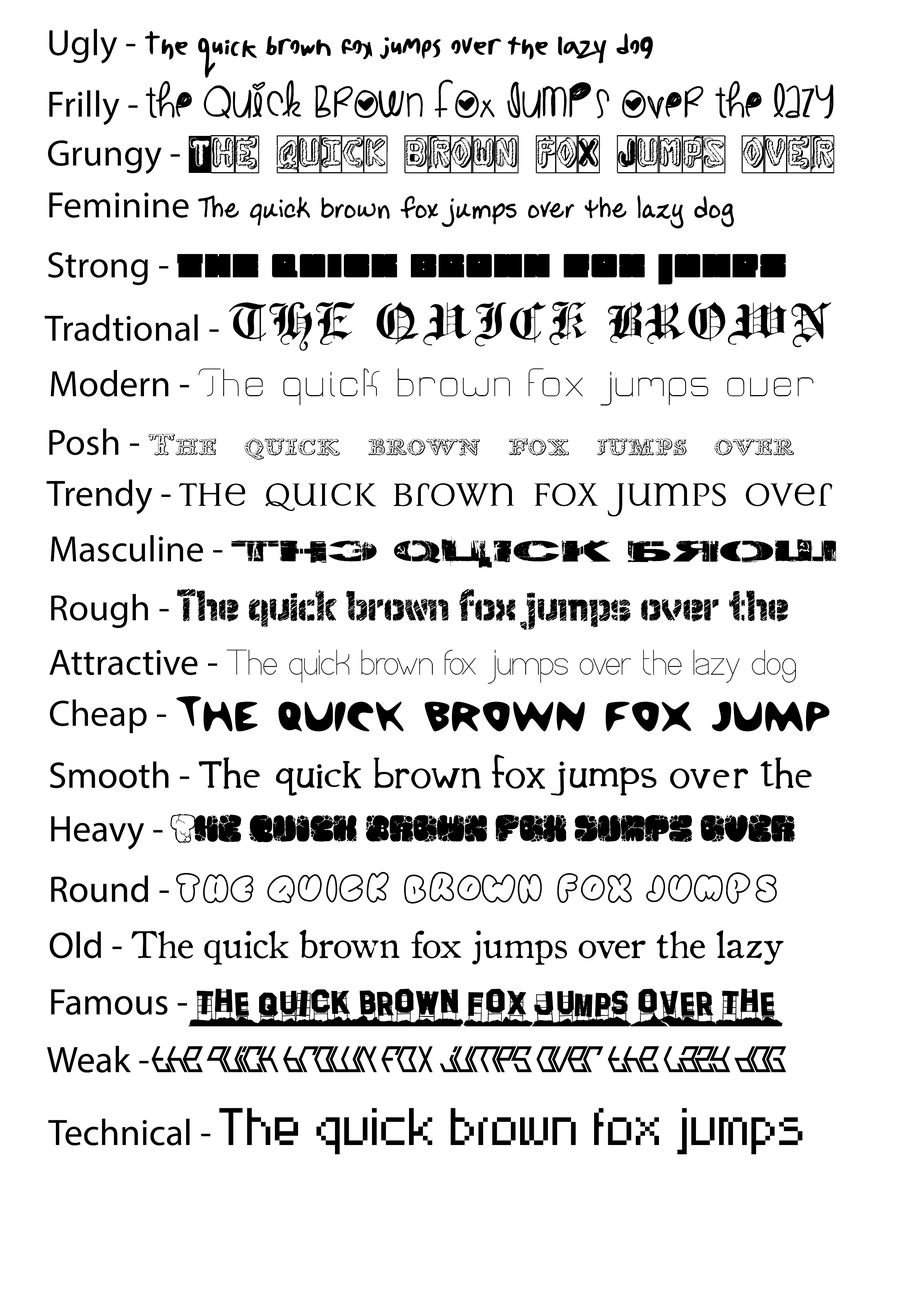
<style>
.page{position:relative;width:918px;height:1299px;background:#ffffff}
.page>*{position:absolute;margin:0}
.t1{font:37px "BadHandwriting7.2";color:#000000}
.t2{font:37px "MyriadPro-Regular";color:#000000}
.t3{font:37px "CuteLove";color:#000000}
.t4{font:37px "DymoGrungeBubble";color:#000000}
.t5{font:37px "LadylikeBB";color:#000000}
.t6{font:37px "BiggerBetterFasterStrongerPeter";color:#000000}
.t7{font:37px "Traditional-Gothic,-17th-c.-Regular";color:#000000}
.t8{font:37px "Untitled";color:#000000}
.t9{font:37px "ImprentaRoyalNonpareilBeveled";color:#000000}
.t10{font:37px "MultimaStrong";color:#000000}
.t11{font:37px "GulagDecay";color:#000000}
.t12{font:37px "WCWunderbachRoughBta";color:#000000}
.t13{font:37px "OPTICALFIBER";color:#000000}
.t14{font:37px "CheapMotel";color:#000000}
.t15{font:37px "39Smooth";color:#000000}
.t16{font:37px "MAWNSrock";color:#000000}
.t17{font:37px "SimpleRounded";color:#000000}
.t18{font:37px "OldStyle1HPLHS";color:#000000}
.t19{font:37px "HollywoodCapitalHills";color:#000000}
.t20{font:37px "BrokennWeakFont";color:#000000}
.t21{font:37px "RittswoodTechnical-Regular";color:#000000}
</style>
<div class="page">
<p class="t1" style="left:49px;top:29px;width:604px;height:49px"><span class="t2">Ugly - </span>The quick brown fox jumps over the lazy dog</p>
<p class="t3" style="left:49px;top:80px;width:785px;height:45px"><span class="t2">Frilly - </span>The quick brown fox jumps over the lazy dog</p>
<p class="t4" style="left:48px;top:135px;width:786px;height:39px"><span class="t2">Grungy - </span>The quick brown fox jumps over the lazy dog</p>
<p class="t5" style="left:49px;top:193px;width:685px;height:35px"><span class="t2">Feminine </span>The quick brown fox jumps over the lazy dog</p>
<p class="t6" style="left:48px;top:252px;width:738px;height:33px"><span class="t2">Strong - </span>The quick brown fox jumps over the lazy dog</p>
<p class="t7" style="left:44px;top:301px;width:788px;height:50px"><span class="t2">Tradtional - </span>The quick brown fox jumps over the lazy dog</p>
<p class="t8" style="left:51px;top:368px;width:763px;height:37px"><span class="t2">Modern - </span>The quick brown fox jumps over the lazy dog</p>
<p class="t9" style="left:49px;top:428px;width:745px;height:31px"><span class="t2">Posh - </span>The quick brown fox jumps over the lazy dog</p>
<p class="t10" style="left:46px;top:479px;width:787px;height:37px"><span class="t2">Trendy - </span>The quick brown fox jumps over the lazy dog</p>
<p class="t11" style="left:51px;top:535px;width:785px;height:33px"><span class="t2">Masculine - </span>The quick brow brown fox jumps over the lazy dog</p>
<p class="t12" style="left:51px;top:589px;width:738px;height:41px"><span class="t2">Rough - </span>The quick brown fox jumps over the lazy dog</p>
<p class="t13" style="left:49px;top:649px;width:747px;height:35px"><span class="t2">Attractive - </span>The quick brown fox jumps over the lazy dog</p>
<p class="t14" style="left:50px;top:696px;width:780px;height:37px"><span class="t2">Cheap - </span>The quick brown fox jump jumps over the lazy dog</p>
<p class="t15" style="left:50px;top:754px;width:762px;height:42px"><span class="t2">Smooth - </span>The quick brown fox jumps over the lazy dog</p>
<p class="t16" style="left:51px;top:814px;width:744px;height:35px"><span class="t2">Heavy -</span> The quick brown fox jumps over the lazy dog</p>
<p class="t17" style="left:51px;top:872px;width:726px;height:32px"><span class="t2">Round - </span>The quick brown fox jumps over the lazy dog</p>
<p class="t18" style="left:50px;top:929px;width:734px;height:36px"><span class="t2">Old - </span>The quick brown fox jumps over the lazy dog</p>
<p class="t19" style="left:51px;top:988px;width:732px;height:38px"><span class="t2">Famous - </span>The quick brown fox jumps over the lazy dog</p>
<p class="t20" style="left:47px;top:1046px;width:739px;height:27px"><span class="t2">Weak - </span>The quick brown fox jumps over the lazy dog</p>
<p class="t21" style="left:48px;top:1108px;width:755px;height:46px"><span class="t2">Technical - </span>The quick brown fox jumps over the lazy dog</p>
</div>
